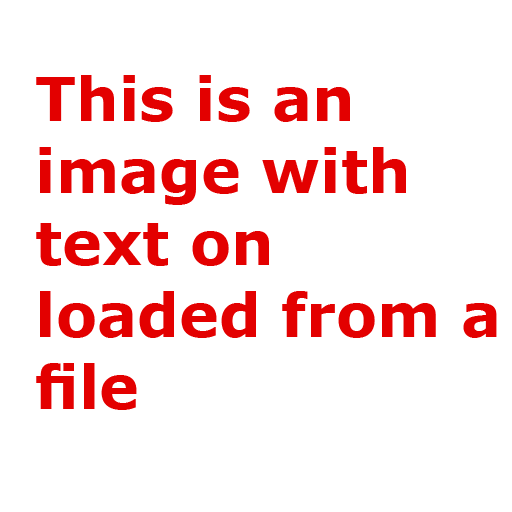
<style>
.page{position:relative;width:512px;height:512px;background:#ffffff}
.page>*{position:absolute;margin:0}
.t1{font:60px "Verdana-Bold";color:#e30000}
</style>
<div class="page">
<p class="t1" style="left:36px;top:75px;width:461px;height:335px">This is an image with text on loaded from a file</p>
</div>
